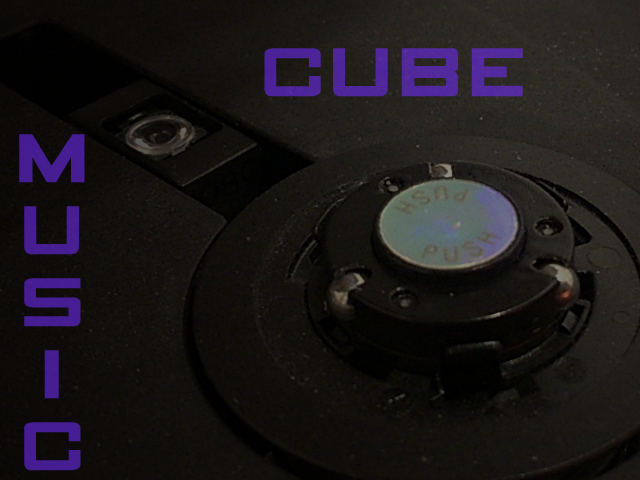
<style>
.page{position:relative;width:640px;height:480px}
.page>*{position:absolute;margin:0}
.t1{font:60px "GAMECUBENDualSet";color:#51279c}
.t2{font:60px "GAMECUBENDualSet";color:#461d93}
</style>
<div class="page">
<p class="t1" style="left:264px;top:48px;width:259px;height:49px">CUBE</p>
<p class="t2" style="left:19px;top:134px;width:66px;height:337px;text-align:center">M<br>U<br>S<br>I<br>C</p>
</div>
